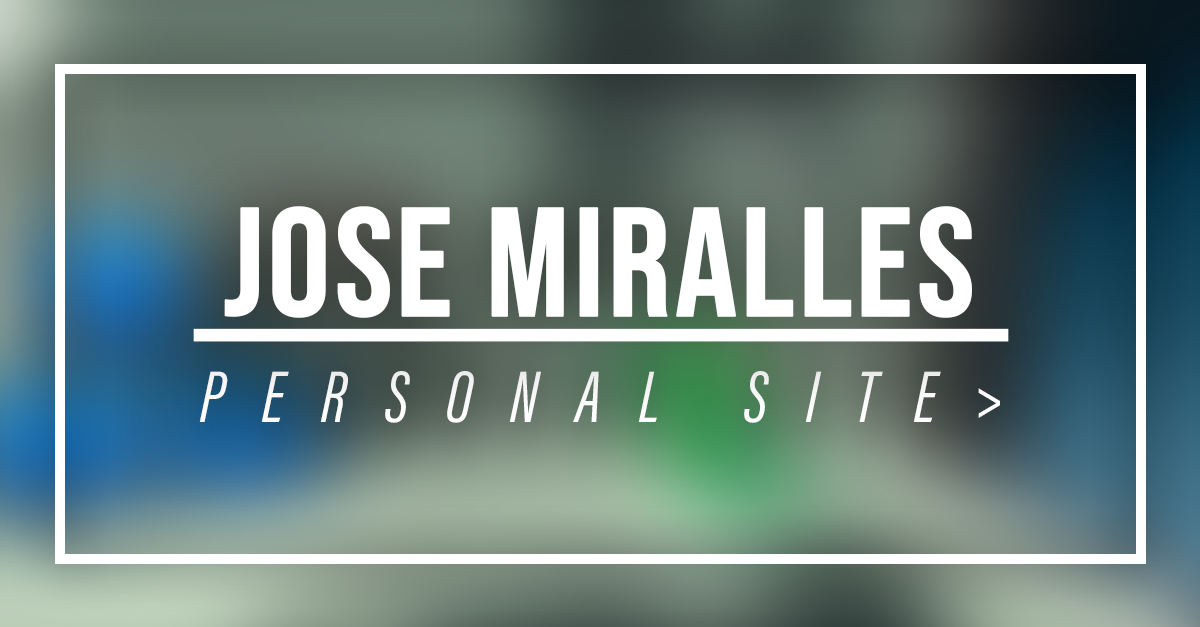
<style>
.page{position:relative;width:1200px;height:627px}
.page>*{position:absolute;margin:0}
.t1{font:155.3px "BebasNeue-Regular";color:#ffffff;font-weight:bold;text-decoration:underline}
.t2{font:75.3px "AcuminConcept-ExtraCondensedItalic";letter-spacing:0.5em;color:#ffffff;font-style:italic}
</style>
<div class="page">
<p class="t1" style="left:193px;top:206px;width:816px;height:136px">Jose Miralles</p>
<p class="t2" style="left:199px;top:371px;width:801px;height:52px">PERSONAL SITE&gt;</p>
</div>
